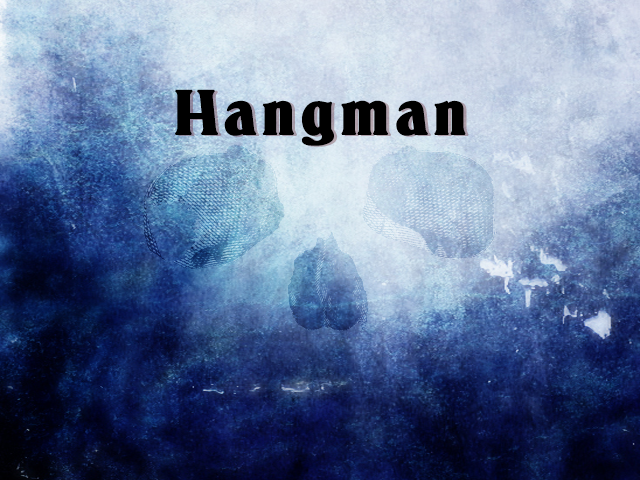
<style>
.page{position:relative;width:640px;height:480px}
.page>*{position:absolute;margin:0}
.t1{font:60px "Deneane";letter-spacing:0.1em;color:#000000;font-weight:bold}
</style>
<div class="page">
<p class="t1" style="left:175px;top:89px;width:291px;height:57px">Hangman</p>
<p class="t1" style="left:178px;top:90px;width:291px;height:57px">Hangman</p>
</div>
